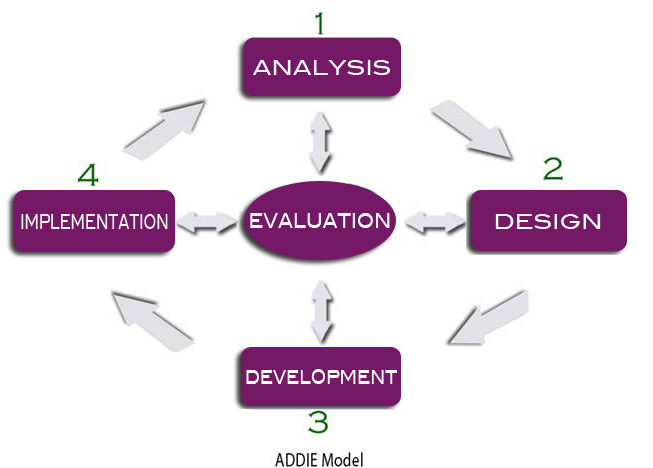
<style>
.page{position:relative;width:653px;height:468px;background:#ffffff}
.page>*{position:absolute;margin:0}
.t1{font:20px "BlairMdITCTTMedium";color:#ffffff}
.t2{font:20px "BlairMdITCTTMedium";color:#ffffff;scale:0.58 1}
.t3{font:20px "BlairMdITCTTMedium";color:#ffffff;scale:0.79 1}
.t4{font:20px "BlairMdITCTTMedium";color:#ffffff;scale:0.7 1}
</style>
<div class="page">
<p class="t1" style="left:253px;top:60px;width:137px;height:15px">ANALYSIS</p>
<p class="t2" style="left:21px;top:214px;width:147px;height:15px">IMPLEMENTATION</p>
<p class="t3" style="left:250px;top:213px;width:140px;height:15px">EVALUATION</p>
<p class="t1" style="left:495px;top:214px;width:106px;height:15px">DESIGN</p>
<p class="t4" style="left:246px;top:369px;width:151px;height:15px">DEVELOPMENT</p>
</div>
